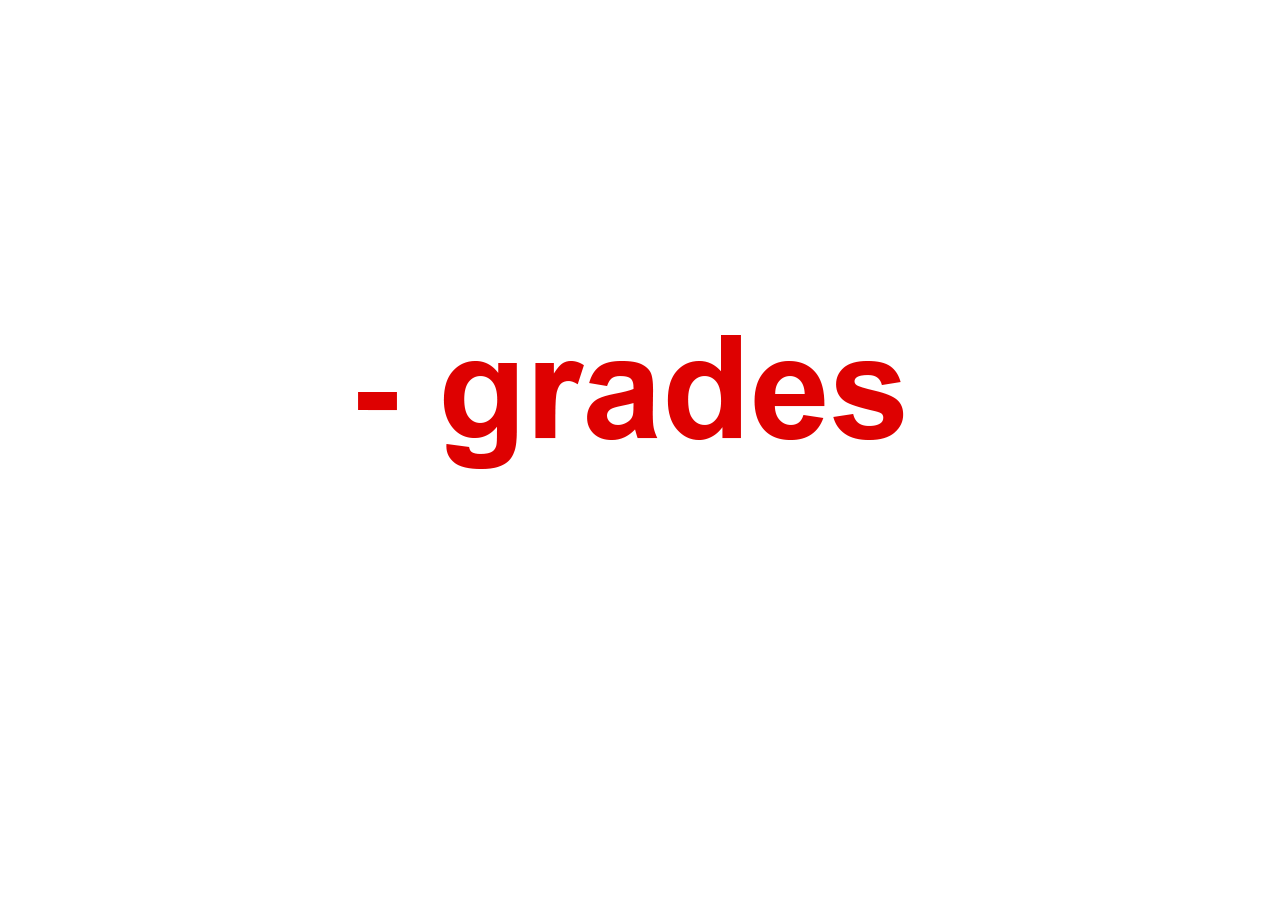
<style>
.page{position:relative;width:1280px;height:900px;background:#ffffff}
.page>*{position:absolute;margin:0}
.t1{font:144px "Arial-BoldMT";color:#de0101}
</style>
<div class="page">
<p class="t1" style="left:358px;top:335px;width:546px;height:134px">- grades</p>
</div>
